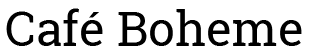
<style>
.page{position:relative;width:313px;height:50px;background:#ffffff}
.page>*{position:absolute;margin:0}
.t1{font:48px "RobotoSlab-Regular";color:#000000}
</style>
<div class="page">
<p class="t1" style="left:6px;top:8px;width:296px;height:38px">Café Boheme</p>
</div>
